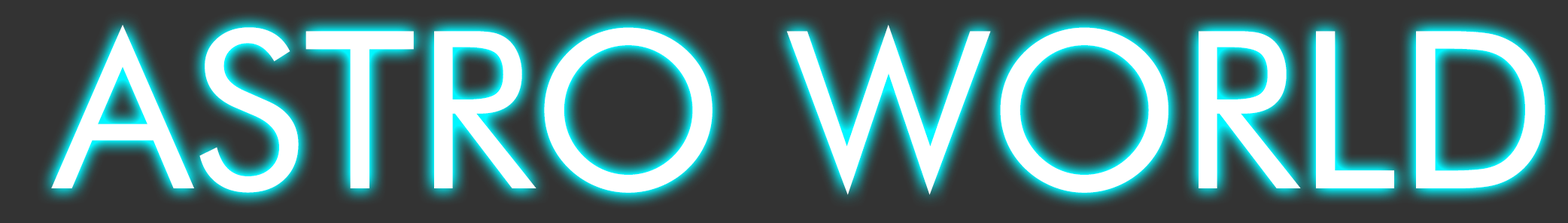
<style>
.page{position:relative;width:1568px;height:223px;background:#333333}
.page>*{position:absolute;margin:0}
.t1{font:219.4px "FuturaBT-Book";color:#ffffff}
</style>
<div class="page">
<p class="t1" style="left:51px;top:25px;width:1494px;height:170px">ASTRO WORLD</p>
</div>
